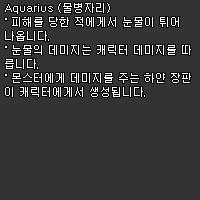
<style>
.page{position:relative;width:200px;height:200px;background:#333333}
.page>*{position:absolute;margin:0}
.t1{font:11px/14px "Dotum";color:#ffffff}
</style>
<div class="page">
<p class="t1" style="left:5px;top:3px;width:186px;height:94px">Aquarius (물병자리)<br>˚ 피해를 당한 적에게서 눈물이 튀어<br>나옵니다.<br>˚ 눈물의 데미지는 캐릭터 데미지를 따<br>릅니다.<br>˚ 몬스터에게 데미지를 주는 하얀 장판<br>이 캐릭터에게서 생성됩니다.</p>
</div>
